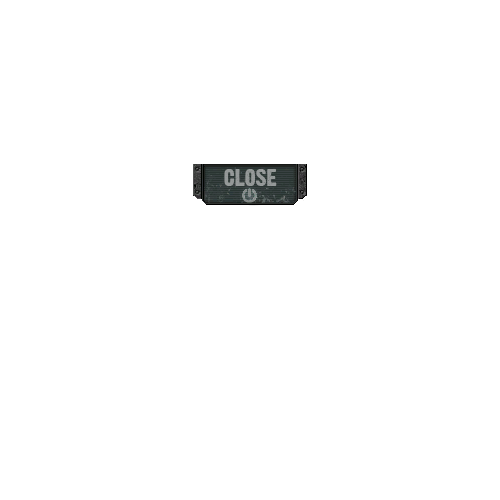
<style>
.page{position:relative;width:500px;height:500px;background:#ffffff}
.page>*{position:absolute;margin:0}
.t1{font:21px "DirtyHeadline";color:#959998;text-transform:uppercase}
</style>
<div class="page">
<p class="t1" style="left:224px;top:169px;width:53px;height:17px">Close</p>
</div>
